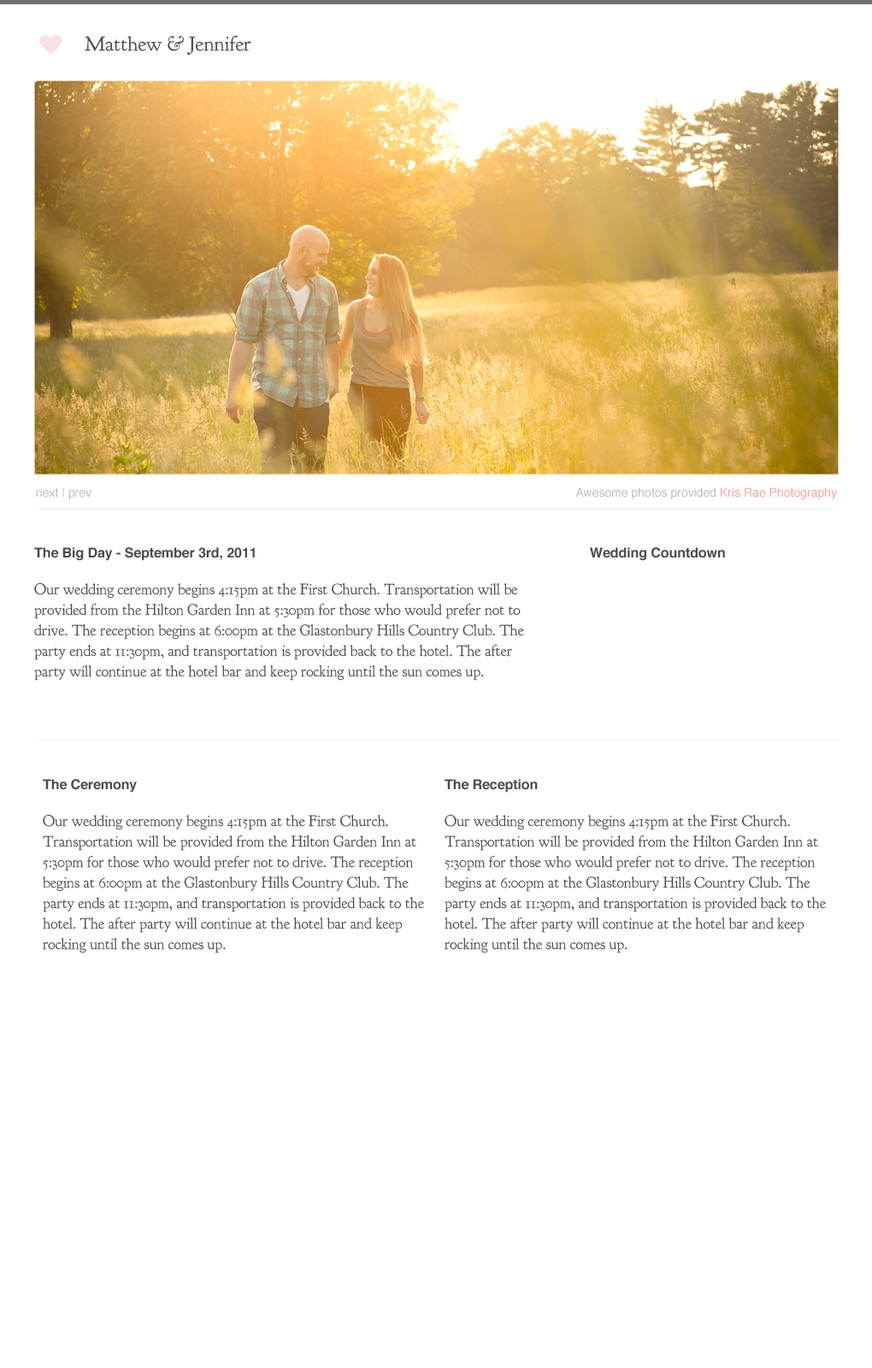
<style>
.page{position:relative;width:872px;height:1368px;background:#ffffff}
.page>*{position:absolute;margin:0}
.t1{font:20.5px "GoudyBookletter1911";color:#4e4b4b}
.t2{font:12px "Helvetica";color:#bfbcbc}
.t3{font:12px "Helvetica";color:#f5a5a5}
.t4{font:15.4px/20.5px "GoudyBookletter1911";letter-spacing:-0.005em;color:#4e4b4b}
.t5{font:13.7px "Helvetica-Bold";letter-spacing:-0.005em;color:#4e4b4b}
</style>
<div class="page">
<p class="t1" style="left:85px;top:35px;width:166px;height:20px">Matthew &amp; Jennifer</p>
<p class="t2" style="left:36px;top:487px;width:55px;height:12px">next | prev</p>
<p class="t2" style="left:575px;top:487px;width:262px;height:12px">Awesome photos provided <span class="t3">Kris Rae Photography</span></p>
<p class="t4" style="left:34px;top:547px;width:490px;height:133px"><span class="t5">The Big Day - September 3rd, 2011<br><br></span>Our wedding ceremony begins 4:15pm at the First Church. Transportation will be provided from the Hilton Garden Inn at 5:30pm for those who would prefer not to drive. The reception begins at 6:00pm at the Glastonbury Hills Country Club. The party ends at 11:30pm, and transportation is provided back to the hotel. The after party will continue at the hotel bar and keep rocking until the sun comes up.</p>
<p class="t5" style="left:590px;top:547px;width:135px;height:14px">Wedding Countdown</p>
<p class="t4" style="left:43px;top:779px;width:381px;height:174px"><span class="t5">The Ceremony<br><br></span>Our wedding ceremony begins 4:15pm at the First Church. Transportation will be provided from the Hilton Garden Inn at 5:30pm for those who would prefer not to drive. The reception begins at 6:00pm at the Glastonbury Hills Country Club. The party ends at 11:30pm, and transportation is provided back to the hotel. The after party will continue at the hotel bar and keep rocking until the sun comes up.</p>
<p class="t4" style="left:444px;top:779px;width:382px;height:174px"><span class="t5">The Reception<br><br></span>Our wedding ceremony begins 4:15pm at the First Church. Transportation will be provided from the Hilton Garden Inn at 5:30pm for those who would prefer not to drive. The reception begins at 6:00pm at the Glastonbury Hills Country Club. The party ends at 11:30pm, and transportation is provided back to the hotel. The after party will continue at the hotel bar and keep rocking until the sun comes up.</p>
</div>
